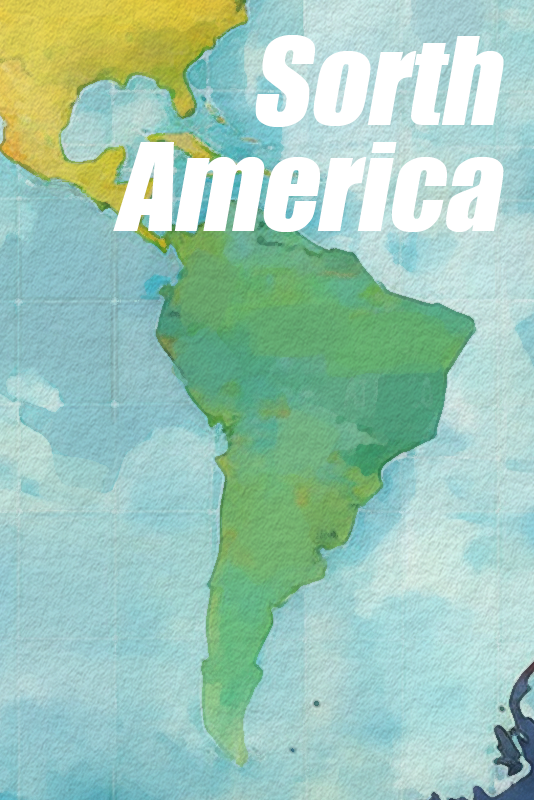
<style>
.page{position:relative;width:534px;height:800px}
.page>*{position:absolute;margin:0}
.t1{font:112px/106px "Impact";color:#ffffff;font-style:italic}
</style>
<div class="page">
<p class="t1" style="left:113px;top:35px;width:391px;height:197px;text-align:right">Sorth<br>America</p>
</div>
